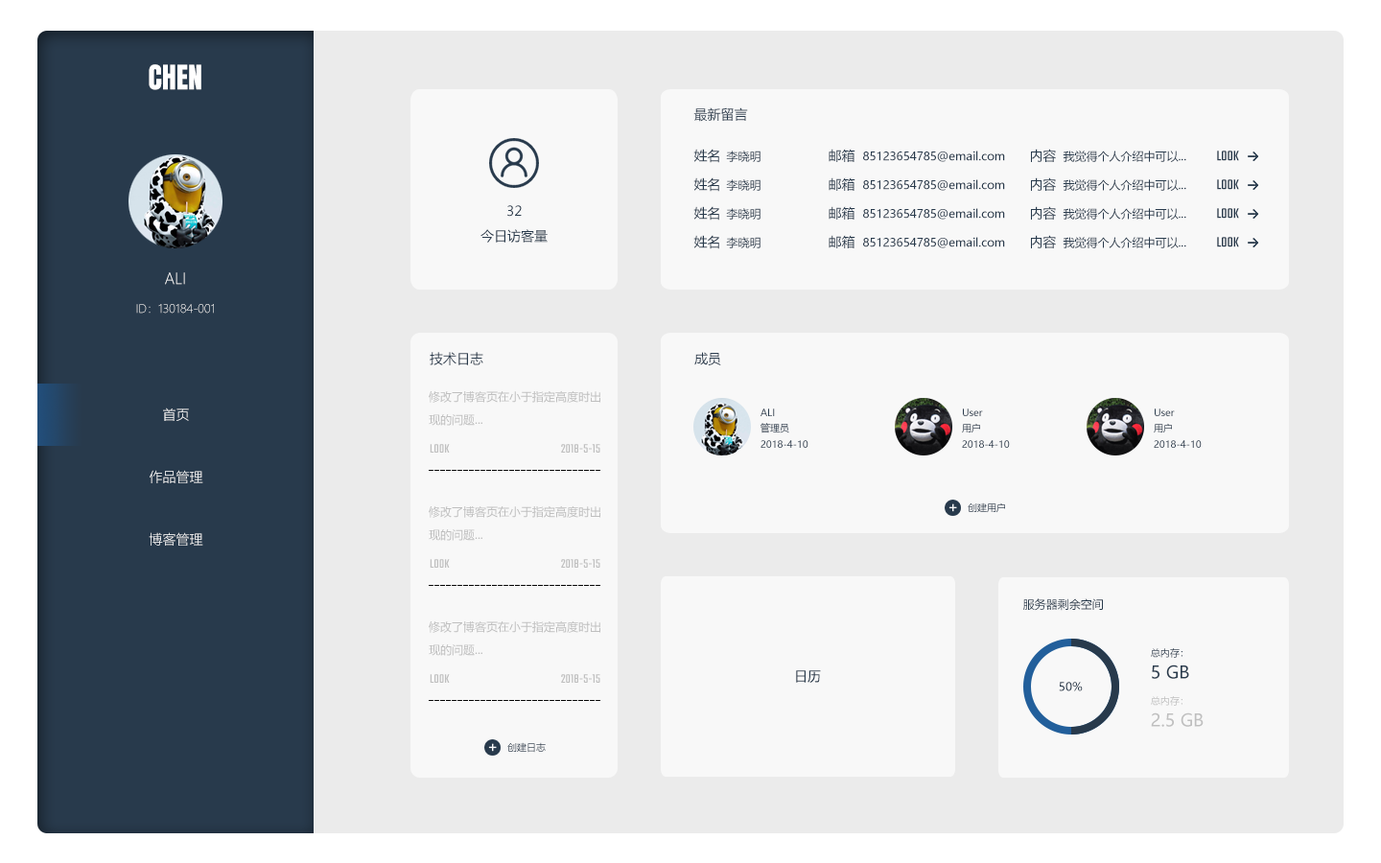
<style>
.page{position:relative;width:1381px;height:863px;background:#f8f8f8}
.page>*{position:absolute;margin:0}
.t1{font:28.8px "Anton-Regular";color:#ffffff}
.t2{font:13.4px "MicrosoftYaHei";color:#283a4c}
.t3{font:11.5px "MicrosoftYaHei";color:#283a4c}
.t4{font:15.3px "Teko-Regular";color:#283a4c}
.t5{font:15.3px "MicrosoftYaHeiLight"}
.t6{font:11.5px "MicrosoftYaHeiLight"}
.t7{font:11.5px/23px "MicrosoftYaHei";color:#bfbfbf}
.t8{font:13.4px "MicrosoftYaHeiLight"}
.t9{font:9.6px "MicrosoftYaHei";color:#283a4c}
.t10{font:9.6px "MicrosoftYaHei"}
.t11{font:13.4px "Teko-Regular";color:#bfbfbf}
.t12{font:13.4px "MicrosoftYaHeiLight";color:#ffffff}
.t13{font:17.3px "MicrosoftYaHei";color:#283a4c}
.t14{font:9.6px "MicrosoftYaHei";color:#bfbfbf}
.t15{font:17.3px "MicrosoftYaHei";color:#bfbfbf}
</style>
<div class="page">
<p class="t1" style="left:149px;top:64px;width:52px;height:26px">CHEN</p>
<p class="t2" style="left:694px;top:107px;width:54px;height:15px">最新留言</p>
<p class="t2" style="left:694px;top:149px;width:25px;height:14px">姓名</p>
<p class="t2" style="left:829px;top:149px;width:27px;height:13px">邮箱</p>
<p class="t2" style="left:1031px;top:149px;width:25px;height:13px">内容</p>
<p class="t3" style="left:726px;top:151px;width:35px;height:11px">李晓明</p>
<p class="t3" style="left:863px;top:151px;width:142px;height:11px">85123654785@email.com</p>
<p class="t3" style="left:1063px;top:151px;width:124px;height:11px">我觉得个人介绍中可以...</p>
<p class="t4" style="left:1217px;top:151px;width:22px;height:10px">LOOK</p>
<p class="t2" style="left:694px;top:177px;width:25px;height:15px">姓名</p>
<p class="t3" style="left:726px;top:179px;width:35px;height:12px">李晓明</p>
<p class="t2" style="left:829px;top:177px;width:27px;height:14px">邮箱</p>
<p class="t3" style="left:863px;top:179px;width:142px;height:12px">85123654785@email.com</p>
<p class="t2" style="left:1031px;top:177px;width:25px;height:14px">内容</p>
<p class="t3" style="left:1063px;top:179px;width:124px;height:12px">我觉得个人介绍中可以...</p>
<p class="t4" style="left:1217px;top:179px;width:22px;height:11px">LOOK</p>
<p class="t2" style="left:507px;top:205px;width:15px;height:12px">32</p>
<p class="t2" style="left:694px;top:206px;width:25px;height:15px">姓名</p>
<p class="t3" style="left:726px;top:208px;width:35px;height:12px">李晓明</p>
<p class="t2" style="left:829px;top:206px;width:27px;height:14px">邮箱</p>
<p class="t3" style="left:863px;top:208px;width:142px;height:12px">85123654785@email.com</p>
<p class="t2" style="left:1031px;top:206px;width:25px;height:14px">内容</p>
<p class="t3" style="left:1063px;top:208px;width:124px;height:12px">我觉得个人介绍中可以...</p>
<p class="t4" style="left:1217px;top:208px;width:22px;height:11px">LOOK</p>
<p class="t2" style="left:481px;top:229px;width:67px;height:14px">今日访客量</p>
<p class="t2" style="left:694px;top:235px;width:25px;height:14px">姓名</p>
<p class="t3" style="left:726px;top:237px;width:35px;height:11px">李晓明</p>
<p class="t2" style="left:829px;top:235px;width:27px;height:13px">邮箱</p>
<p class="t3" style="left:863px;top:237px;width:142px;height:11px">85123654785@email.com</p>
<p class="t2" style="left:1031px;top:235px;width:25px;height:13px">内容</p>
<p class="t3" style="left:1063px;top:237px;width:124px;height:11px">我觉得个人介绍中可以...</p>
<p class="t4" style="left:1217px;top:237px;width:22px;height:10px">LOOK</p>
<p class="t5" style="left:165px;top:272px;width:20px;height:13px">ALI</p>
<p class="t6" style="left:136px;top:304px;width:78px;height:10px">ID：130184-001</p>
<p class="t2" style="left:430px;top:352px;width:53px;height:13px">技术日志</p>
<p class="t2" style="left:694px;top:352px;width:27px;height:13px">成员</p>
<p class="t7" style="left:429px;top:390px;width:171px;height:36px">修改了博客页在小于指定高度时出<br>现的问题...</p>
<p class="t8" style="left:163px;top:408px;width:26px;height:13px">首页</p>
<p class="t9" style="left:761px;top:409px;width:14px;height:7px">ALI</p>
<p class="t9" style="left:963px;top:409px;width:20px;height:7px">User</p>
<p class="t9" style="left:1155px;top:409px;width:20px;height:7px">User</p>
<p class="t10" style="left:761px;top:423px;width:28px;height:11px">管理员</p>
<p class="t10" style="left:962px;top:423px;width:18px;height:11px">用户</p>
<p class="t10" style="left:1154px;top:423px;width:18px;height:11px">用户</p>
<p class="t11" style="left:430px;top:444px;width:20px;height:9px">LOOK</p>
<p class="t11" style="left:561px;top:444px;width:39px;height:9px">2018-5-15</p>
<p class="t9" style="left:761px;top:440px;width:48px;height:8px">2018-4-10</p>
<p class="t9" style="left:962px;top:440px;width:48px;height:8px">2018-4-10</p>
<p class="t9" style="left:1154px;top:440px;width:48px;height:8px">2018-4-10</p>
<p class="t12" style="left:150px;top:470px;width:53px;height:13px">作品管理</p>
<p class="t7" style="left:429px;top:506px;width:171px;height:35px">修改了博客页在小于指定高度时出<br>现的问题...</p>
<p class="t10" style="left:968px;top:503px;width:37px;height:10px">创建用户</p>
<p class="t12" style="left:149px;top:532px;width:54px;height:14px">博客管理</p>
<p class="t11" style="left:430px;top:559px;width:20px;height:9px">LOOK</p>
<p class="t11" style="left:561px;top:559px;width:39px;height:9px">2018-5-15</p>
<p class="t3" style="left:1023px;top:599px;width:80px;height:12px">服务器剩余空间</p>
<p class="t7" style="left:429px;top:621px;width:171px;height:35px">修改了博客页在小于指定高度时出<br>现的问题...</p>
<p class="t9" style="left:1151px;top:648px;width:32px;height:10px">总内存：</p>
<p class="t13" style="left:1152px;top:665px;width:37px;height:14px">5 GB</p>
<p class="t11" style="left:430px;top:674px;width:20px;height:9px">LOOK</p>
<p class="t11" style="left:561px;top:674px;width:39px;height:9px">2018-5-15</p>
<p class="t2" style="left:796px;top:670px;width:25px;height:13px">日历</p>
<p class="t3" style="left:1059px;top:682px;width:24px;height:10px">50%</p>
<p class="t14" style="left:1151px;top:696px;width:32px;height:10px">总内存：</p>
<p class="t15" style="left:1151px;top:713px;width:53px;height:14px">2.5 GB</p>
<p class="t10" style="left:507px;top:742px;width:39px;height:11px">创建日志</p>
</div>
